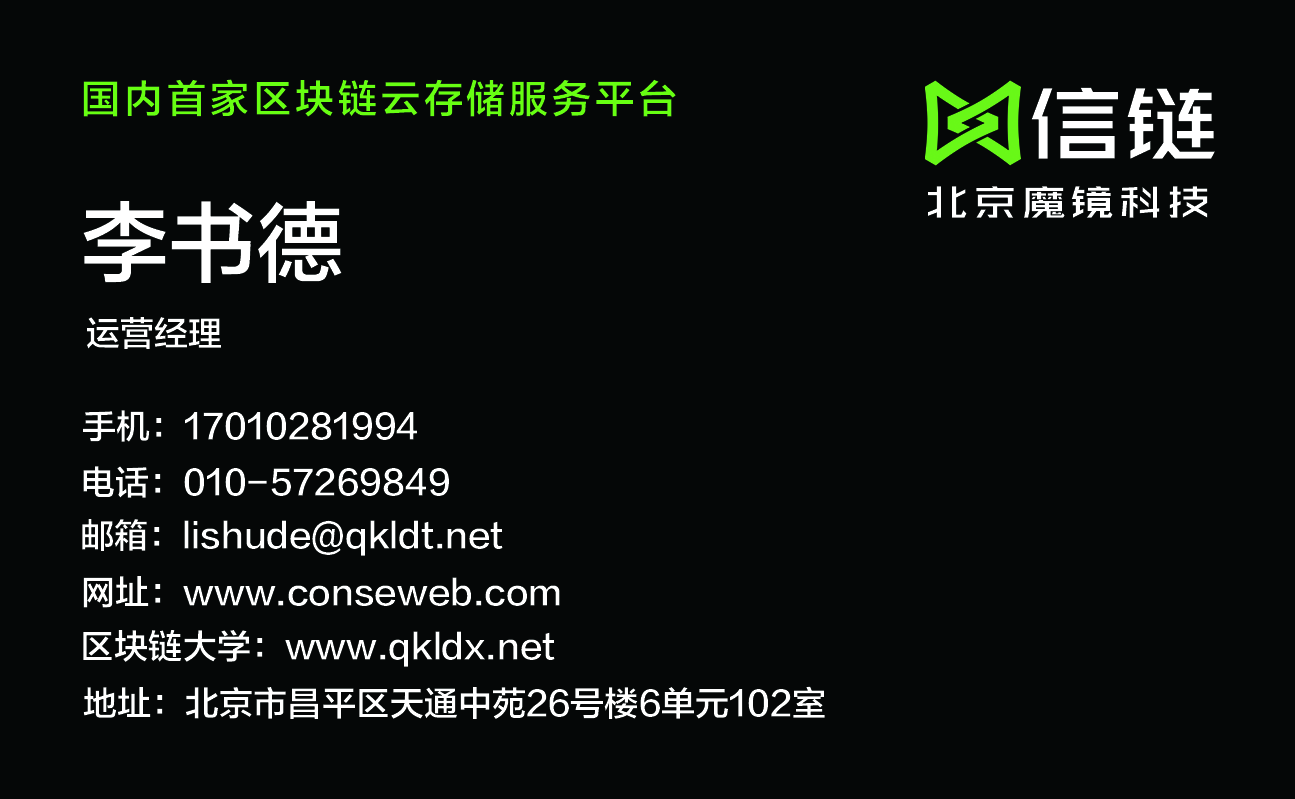
<style>
.page{position:relative;width:1295px;height:799px;background:#050707}
.page>*{position:absolute;margin:0}
.t1{font:38.9px "FZLTZHK--GBK1-0";letter-spacing:0.1em;color:#67ff12}
.t2{font:87.5px "REEJI-BigYoung-BoldGB2.0";color:#ffffff;scale:1.09 1}
.t3{font:38.9px "REEJI-BigYoung-BoldGB2.0";letter-spacing:0.1em;color:#ffffff;scale:1.13 1}
.t4{font:87.5px "FZLTZHK--GBK1-0";color:#ffffff}
.t5{font:34px "FZLTZHK--GBK1-0";color:#ffffff}
</style>
<div class="page">
<p class="t1" style="left:83px;top:79px;width:593px;height:38px">国内首家区块链云存储服务平台</p>
<p class="t2" style="left:1031px;top:87px;width:184px;height:72px">信链</p>
<p class="t3" style="left:928px;top:186px;width:280px;height:32px">北京魔镜科技</p>
<p class="t4" style="left:83px;top:201px;width:259px;height:82px">李书德</p>
<p class="t5" style="left:86px;top:317px;width:135px;height:32px">运营经理</p>
<p class="t5" style="left:83px;top:410px;width:334px;height:32px">手机：17010281994</p>
<p class="t5" style="left:83px;top:466px;width:366px;height:32px">电话：010-57269849</p>
<p class="t5" style="left:82px;top:519px;width:421px;height:37px">邮箱：lishude@qkldt.net</p>
<p class="t5" style="left:83px;top:576px;width:477px;height:32px">网址：www.conseweb.com</p>
<p class="t5" style="left:83px;top:630px;width:472px;height:37px">区块链大学：www.qkldx.net</p>
<p class="t5" style="left:83px;top:686px;width:742px;height:33px">地址：北京市昌平区天通中苑26号楼6单元102室</p>
</div>
